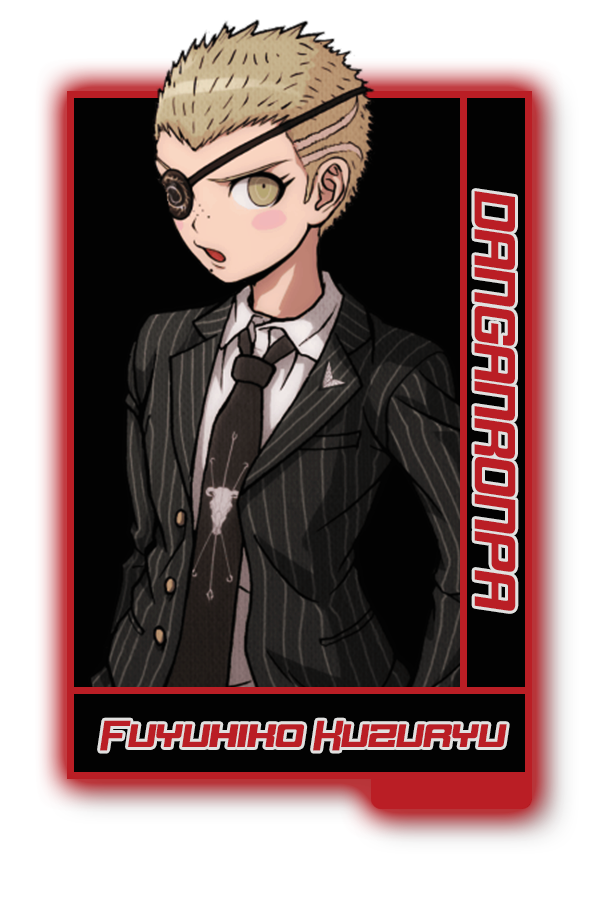
<style>
.page{position:relative;width:600px;height:900px;background:#020202}
.page>*{position:absolute;margin:0}
.t1{font:48.8px "DorBlue";color:#bb2c2e}
.t2{font:35.7px "DorBlue";color:#bb2c2e}
</style>
<div class="page">
<p class="t1" style="left:474px;top:191px;width:42px;height:420px;rotate:90deg">DANGANRONPA</p>
<p class="t2" style="left:100px;top:720px;width:407px;height:31px">Fuyuhiko Kuzuryu</p>
</div>
